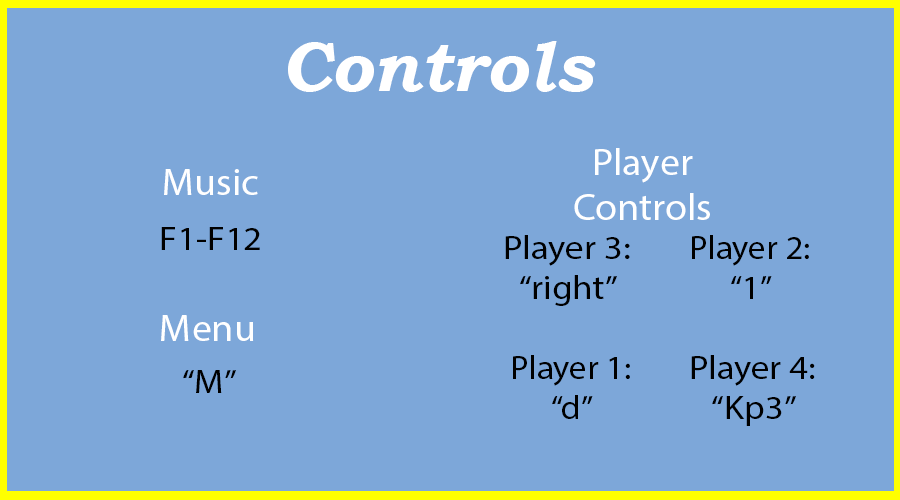
<style>
.page{position:relative;width:900px;height:500px;background:#7da7d9}
.page>*{position:absolute;margin:0}
.t1{font:70px "BookmanOldStyle-BoldItalic";color:#ffffff}
.t2{font:37.5px "MyriadPro-Regular";color:#ffffff;scale:1.06 1}
.t3{font:33.3px "MyriadPro-Regular";color:#000000;scale:1.1 1}
.t4{font:33.3px "MyriadPro-Regular";color:#000000;scale:1.05 1}
</style>
<div class="page">
<p class="t1" style="left:288px;top:41px;width:308px;height:51px">Controls</p>
<p class="t2" style="left:574px;top:148px;width:136px;height:72px;text-align:center">Player Controls</p>
<p class="t2" style="left:164px;top:169px;width:94px;height:26px">Music</p>
<p class="t3" style="left:161px;top:227px;width:99px;height:23px">F1-F12</p>
<p class="t3" style="left:505px;top:235px;width:125px;height:71px">Player 3:<br>“right”</p>
<p class="t4" style="left:692px;top:235px;width:117px;height:64px">Player 2:<br>“1”</p>
<p class="t2" style="left:161px;top:315px;width:93px;height:26px">Menu</p>
<p class="t4" style="left:513px;top:355px;width:117px;height:64px">Player 1:<br>“d”</p>
<p class="t3" style="left:691px;top:355px;width:124px;height:71px">Player 4:<br>“Kp3”</p>
<p class="t3" style="left:183px;top:370px;width:53px;height:23px">“M”</p>
</div>
